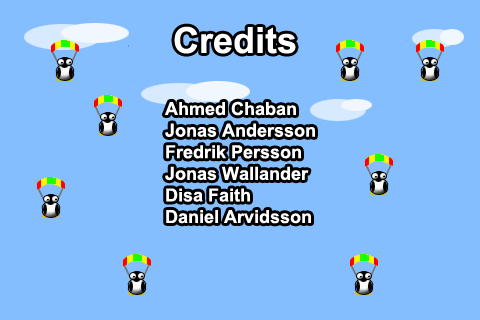
<style>
.page{position:relative;width:480px;height:320px;background:#84befe}
.page>*{position:absolute;margin:0}
.t1{font:36px "Arial-BoldMT";color:#ffffff}
.t2{font:18px "Arial-BoldMT";color:#ffffff}
</style>
<div class="page">
<p class="t1" style="left:174px;top:26px;width:122px;height:28px">Credits</p>
<p class="t2" style="left:164px;top:101px;width:151px;height:123px">Ahmed Chaban<br>Jonas Andersson<br>Fredrik Persson<br>Jonas Wallander<br>Disa Faith<br>Daniel Arvidsson</p>
</div>
